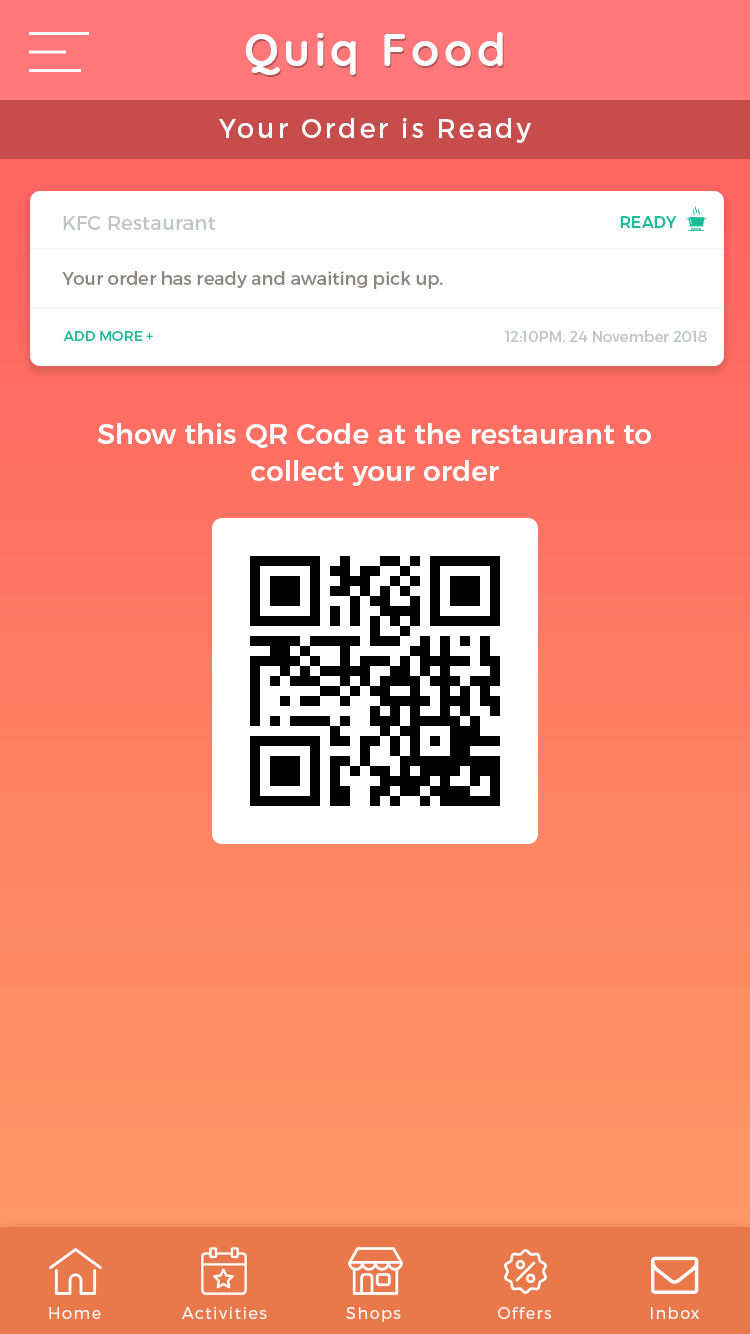
<style>
.page{position:relative;width:750px;height:1334px}
.page>*{position:absolute;margin:0}
.t1{font:46px "Quicksand-Bold";letter-spacing:0.1em;color:#ffffff}
.t2{font:27px "Montserrat-Regular";letter-spacing:0.1em;color:#ffffff}
.t3{font:20px "Montserrat-Regular";color:#bdc3c7}
.t4{font:20px "Montserrat-Regular";color:#bdc3c7;text-transform:uppercase}
.t5{font:16px "Montserrat-Medium";color:#1abc9c;text-transform:uppercase}
.t6{font:18px "Montserrat-Regular";color:#8d867f}
.t7{font:14px "Montserrat-Regular";color:#1abc9c;text-transform:uppercase}
.t8{font:15px "Montserrat-Regular";color:#bdc3c7}
.t9{font:28px/36.4px "Montserrat-Medium";color:#ffffff}
.t10{font:16px "Montserrat-Light";letter-spacing:0.1em;color:#ffffff}
</style>
<div class="page">
<p class="t1" style="left:245px;top:32px;width:258px;height:43px">Quiq Food</p>
<p class="t2" style="left:219px;top:118px;width:312px;height:25px">Your Order is Ready</p>
<p class="t3" style="left:63px;top:216px;width:153px;height:14px"><span class="t4">KFC </span>Restaurant</p>
<p class="t5" style="left:620px;top:216px;width:57px;height:12px">Ready</p>
<p class="t6" style="left:62px;top:271px;width:381px;height:18px">Your order has ready and awaiting pick up.</p>
<p class="t7" style="left:63px;top:331px;width:90px;height:10px">Add more +</p>
<p class="t8" style="left:505px;top:330px;width:202px;height:13px">12:10PM, 24 November 2018</p>
<p class="t9" style="left:97px;top:423px;width:554px;height:63px;text-align:center">Show this QR Code at the restaurant to<br>collect your order</p>
<p class="t10" style="left:49px;top:1307px;width:52px;height:12px">Home</p>
<p class="t10" style="left:182px;top:1307px;width:85px;height:12px">Activities</p>
<p class="t10" style="left:346px;top:1307px;width:55px;height:15px">Shops</p>
<p class="t10" style="left:498px;top:1307px;width:53px;height:12px">Offers</p>
<p class="t10" style="left:651px;top:1307px;width:48px;height:12px">Inbox</p>
</div>
